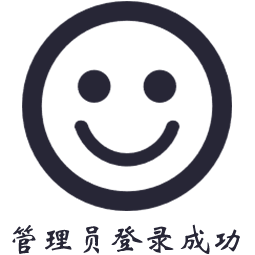
<style>
.page{position:relative;width:255px;height:255px;background:#ffffff}
.page>*{position:absolute;margin:0}
.t1{font:33.3px "STXinwei";letter-spacing:0.02em;color:#272636}
</style>
<div class="page">
<p class="t1" style="left:12px;top:224px;width:228px;height:30px">管理员登录成功</p>
</div>
